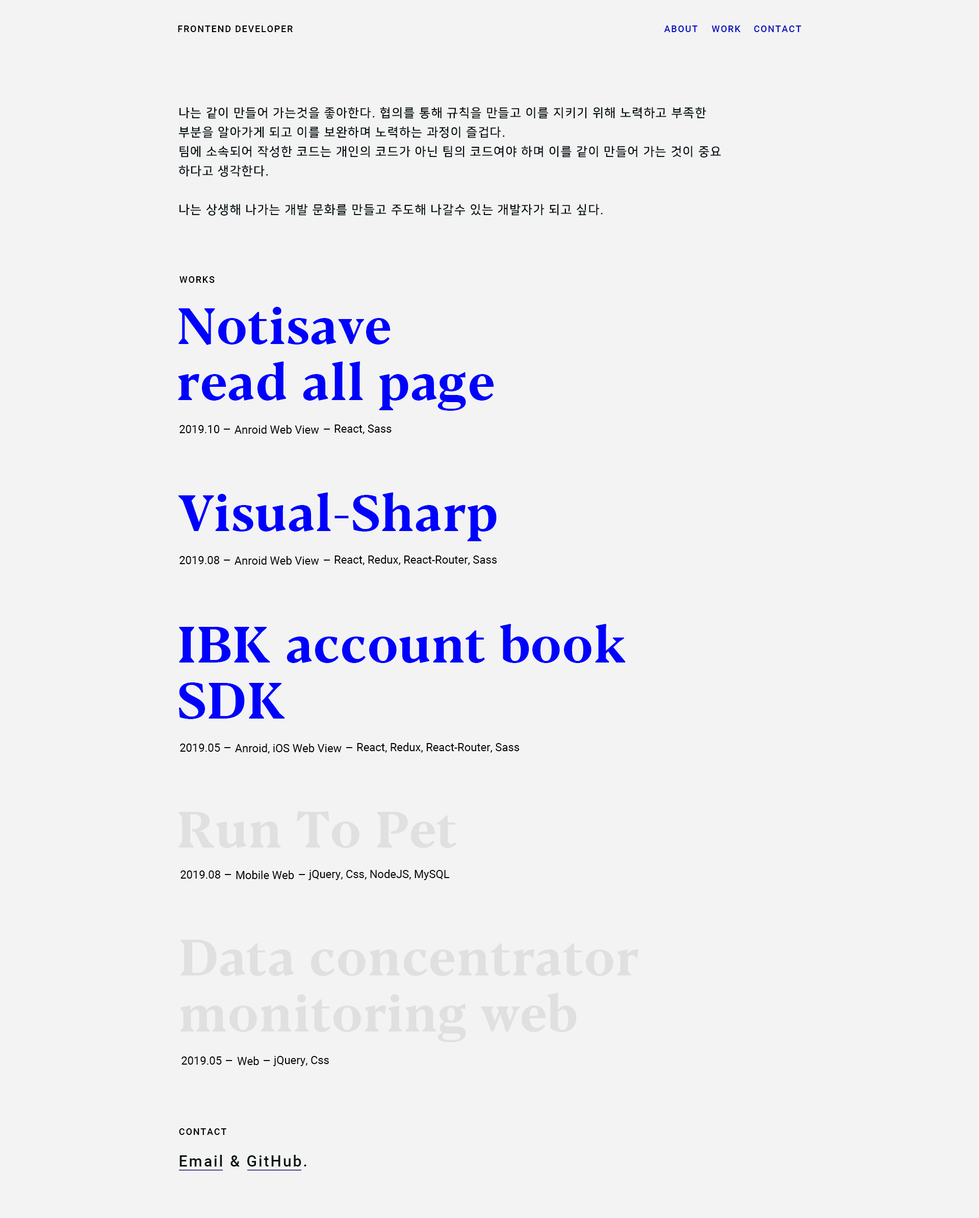
<style>
.page{position:relative;width:979px;height:1218px;background:#f3f3f3}
.page>*{position:absolute;margin:0}
.t1{font:9.2px "Roboto-Medium";letter-spacing:0.1em;color:#000002}
.t2{font:9.2px "Roboto-Medium";letter-spacing:0.1em;color:#0911bd}
.t3{font:12.2px/19.4px "NanumSquareB";letter-spacing:0.06em;color:#030e11}
.t4{font:9.2px "Roboto-Medium";letter-spacing:0.1em;color:#000000}
.t5{font:51px/56.1px "BlackerText-Bold";color:#0001fd}
.t6{font:11.2px "Roboto-Regular";color:#02020a}
.t7{font:51px "BlackerText-Bold";color:#0001fd}
.t8{font:51px "BlackerText-Bold";color:#e0e0e0}
.t9{font:51px/56.1px "BlackerText-Bold";color:#e0e0e0}
.t10{font:15.3px "Roboto-Medium";letter-spacing:0.1em;color:#081414}
</style>
<div class="page">
<p class="t1" style="left:178px;top:25px;width:115px;height:7px">FRONTEND DEVELOPER</p>
<p class="t2" style="left:664px;top:25px;width:33px;height:7px">ABOUT</p>
<p class="t2" style="left:712px;top:25px;width:29px;height:7px">WORK</p>
<p class="t2" style="left:754px;top:25px;width:47px;height:7px">CONTACT</p>
<p class="t3" style="left:178px;top:107px;width:543px;height:109px">나는 같이 만들어 가는것을 좋아한다. 협의를 통해 규칙을 만들고 이를 지키기 위해 노력하고 부족한<br>부분을 알아가게 되고 이를 보완하며 노력하는 과정이 즐겁다.<br>팀에 소속되어 작성한 코드는 개인의 코드가 아닌 팀의 코드여야 하며 이를 같이 만들어 가는 것이 중요<br>하다고 생각한다.<br><br>나는 상생해 나가는 개발 문화를 만들고 주도해 나갈수 있는 개발자가 되고 싶다.</p>
<p class="t4" style="left:179px;top:276px;width:36px;height:7px">WORKS</p>
<p class="t5" style="left:178px;top:307px;width:316px;height:104px">Notisave <br>read all page</p>
<p class="t6" style="left:179px;top:425px;width:40px;height:8px">2019.10</p>
<p class="t6" style="left:234px;top:425px;width:85px;height:9px">Anroid Web View</p>
<p class="t6" style="left:334px;top:425px;width:57px;height:9px">React, Sass</p>
<p class="t7" style="left:178px;top:492px;width:319px;height:49px">Visual-Sharp</p>
<p class="t6" style="left:179px;top:556px;width:40px;height:8px">2019.08</p>
<p class="t6" style="left:234px;top:556px;width:85px;height:9px">Anroid Web View</p>
<p class="t6" style="left:334px;top:555px;width:163px;height:10px">React, Redux, React-Router, Sass</p>
<p class="t5" style="left:178px;top:624px;width:447px;height:95px">IBK account book<br>SDK</p>
<p class="t6" style="left:180px;top:744px;width:40px;height:8px">2019.05</p>
<p class="t6" style="left:235px;top:744px;width:107px;height:10px">Anroid, iOS Web View</p>
<p class="t6" style="left:357px;top:743px;width:162px;height:10px">React, Redux, React-Router, Sass</p>
<p class="t8" style="left:178px;top:812px;width:278px;height:36px">Run To Pet</p>
<p class="t6" style="left:308px;top:870px;width:142px;height:10px">jQuery, Css, NodeJS, MySQL</p>
<p class="t6" style="left:180px;top:871px;width:40px;height:8px">2019.08</p>
<p class="t6" style="left:236px;top:871px;width:58px;height:8px">Mobile Web</p>
<p class="t9" style="left:180px;top:940px;width:458px;height:102px">Data concentrator<br>monitoring web</p>
<p class="t6" style="left:181px;top:1057px;width:41px;height:8px">2019.05</p>
<p class="t6" style="left:237px;top:1057px;width:22px;height:8px">Web</p>
<p class="t6" style="left:273px;top:1056px;width:56px;height:10px">jQuery, Css</p>
<p class="t4" style="left:179px;top:1129px;width:47px;height:6px">CONTACT</p>
<p class="t10" style="left:179px;top:1155px;width:127px;height:12px">Email &amp; GitHub.</p>
</div>
